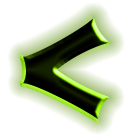
<style>
.page{position:relative;width:140px;height:140px;background:#ffffff}
.page>*{position:absolute;margin:0}
.t1{font:200px "SuperPositive";letter-spacing:0.05em;color:#000000}
</style>
<div class="page">
<p class="t1" style="left:23px;top:18px;width:87px;height:101px">&lt;</p>
</div>
